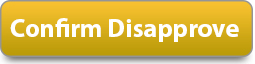
<style>
.page{position:relative;width:255px;height:64px}
.page>*{position:absolute;margin:0}
.t1{font:25.8px "MyriadPro-Bold";color:#ffffff}
</style>
<div class="page">
<p class="t1" style="left:10px;top:18px;width:229px;height:24px">Confirm Disapprove</p>
</div>
